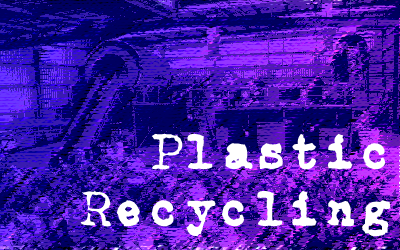
<style>
.page{position:relative;width:400px;height:250px}
.page>*{position:absolute;margin:0}
.t1{font:48px "CarbonType";color:#ffffff}
</style>
<div class="page">
<p class="t1" style="left:80px;top:133px;width:311px;height:106px;text-align:right">Plastic Recycling</p>
</div>
